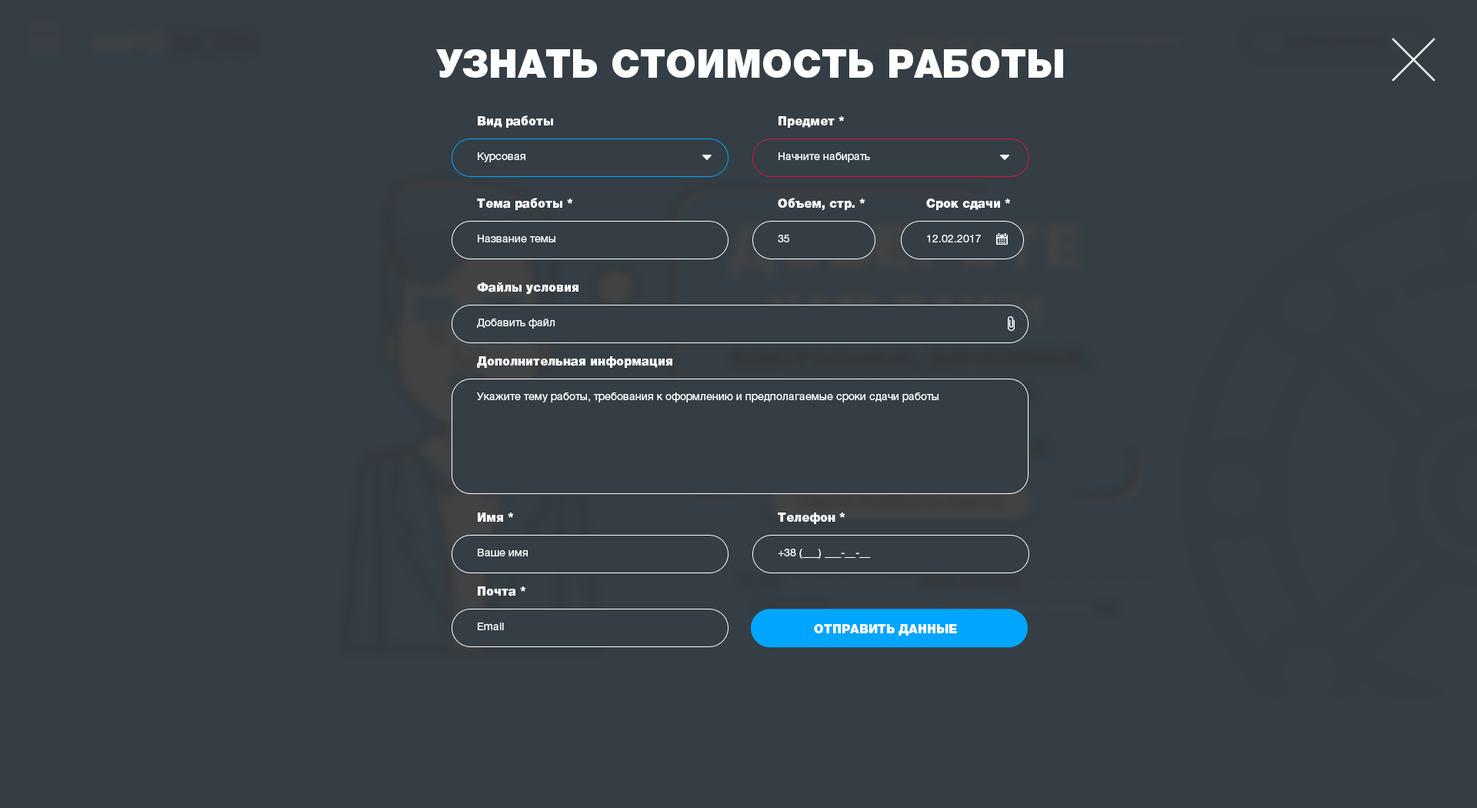
<style>
.page{position:relative;width:1477px;height:808px;background:#343e44}
.page>*{position:absolute;margin:0}
.t1{font:38.5px "HelveticaNeueCyr-Black";color:#ffffff}
.t2{font:12.3px "HelveticaNeueCyr-Black";color:#ffffff}
.t3{font:10.8px "HelveticaNeueCyr-Roman";color:#ffffff}
</style>
<div class="page">
<p class="t1" style="left:436px;top:49px;width:627px;height:29px">УЗНАТЬ СТОИМОСТЬ РАБОТЫ</p>
<p class="t2" style="left:478px;top:115px;width:75px;height:13px">Вид работы</p>
<p class="t2" style="left:778px;top:116px;width:66px;height:12px">Предмет *</p>
<p class="t3" style="left:478px;top:152px;width:47px;height:10px">Курсовая</p>
<p class="t3" style="left:778px;top:152px;width:92px;height:10px">Начните набирать</p>
<p class="t2" style="left:477px;top:198px;width:96px;height:12px">Тема работы *</p>
<p class="t2" style="left:778px;top:198px;width:87px;height:12px">Объем, стр. *</p>
<p class="t2" style="left:926px;top:198px;width:85px;height:12px">Срок сдачи *</p>
<p class="t3" style="left:478px;top:235px;width:77px;height:7px">Название темы</p>
<p class="t3" style="left:778px;top:235px;width:11px;height:7px">35</p>
<p class="t3" style="left:927px;top:235px;width:54px;height:7px">12.02.2017</p>
<p class="t2" style="left:477px;top:282px;width:101px;height:12px">Файлы условия</p>
<p class="t3" style="left:477px;top:318px;width:78px;height:10px">Добавить файл</p>
<p class="t2" style="left:477px;top:356px;width:195px;height:12px">Дополнительная информация</p>
<p class="t3" style="left:477px;top:392px;width:461px;height:10px">Укажите тему работы, требования к оформлению и предполагаемые сроки сдачи работы</p>
<p class="t2" style="left:478px;top:512px;width:36px;height:9px">Имя *</p>
<p class="t2" style="left:778px;top:512px;width:67px;height:12px">Телефон *</p>
<p class="t3" style="left:478px;top:548px;width:50px;height:8px">Ваше имя</p>
<p class="t3" style="left:778px;top:548px;width:93px;height:11px">+38 (___) ___-__-__</p>
<p class="t2" style="left:478px;top:586px;width:48px;height:10px">Почта *</p>
<p class="t3" style="left:478px;top:622px;width:26px;height:8px">Email</p>
<p class="t2" style="left:814px;top:624px;width:143px;height:11px">ОТПРАВИТЬ ДАННЫЕ</p>
</div>
